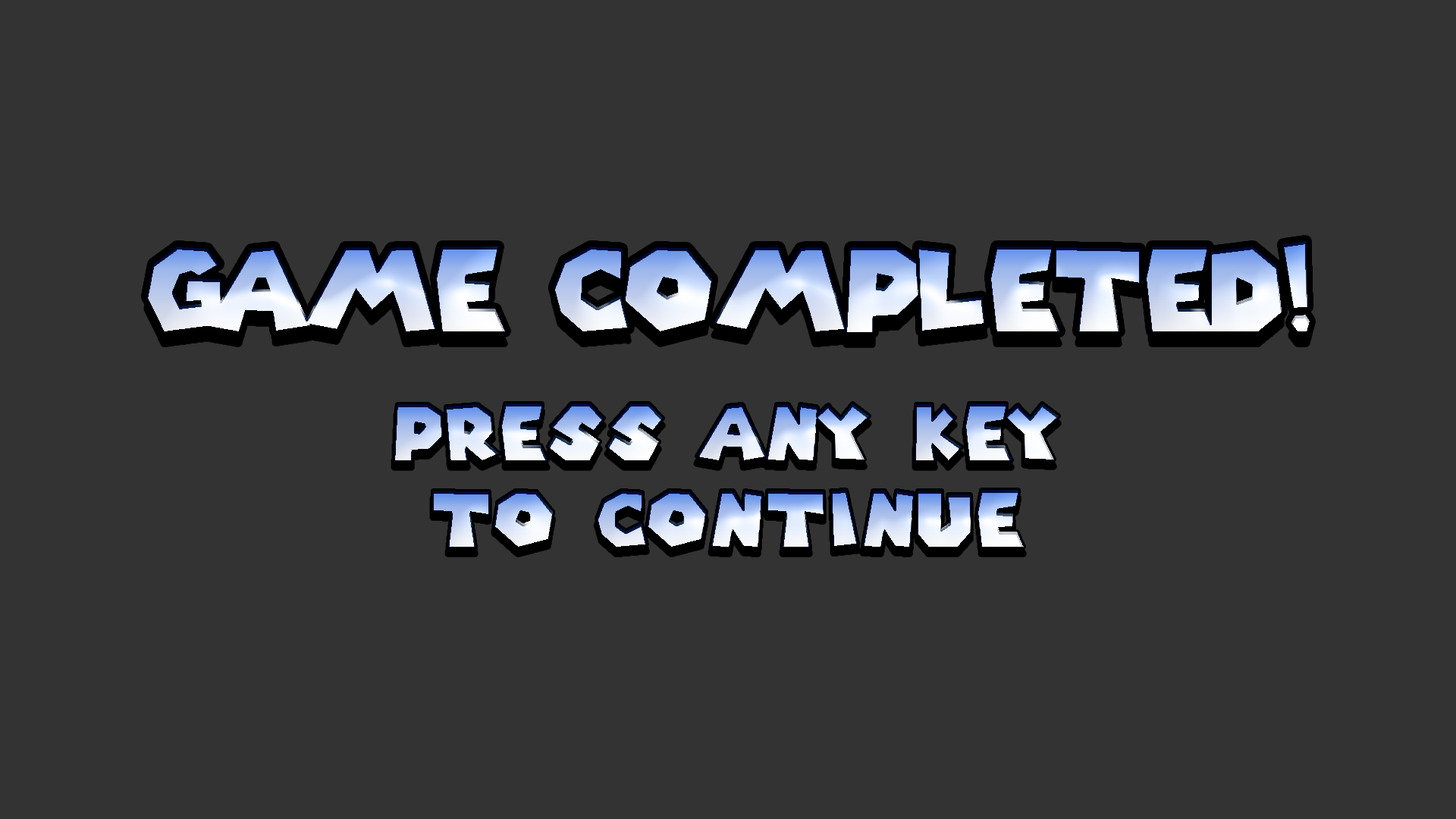
<style>
.page{position:relative;width:1456px;height:819px;background:#333333}
.page>*{position:absolute;margin:0}
.t1{font:113.7px "SuperMarioGalaxy"}
.t2{font:75.8px "SuperMarioGalaxy";letter-spacing:0.05em}
</style>
<div class="page">
<p class="t1" style="left:147px;top:241px;width:1163px;height:91px">game completed!</p>
<p class="t2" style="left:394px;top:403px;width:665px;height:57px">PRESS ANY KEY</p>
<p class="t2" style="left:433px;top:490px;width:591px;height:57px">TO CONTINUE</p>
</div>
